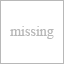
<style>
.page{position:relative;width:64px;height:64px;background:#ffffff}
.page>*{position:absolute;margin:0}
.t1{font:14px "TimesNewRomanPSMT";color:#b8b8b8}
</style>
<div class="page">
<p class="t1" style="left:10px;top:26px;width:44px;height:13px">missing</p>
</div>
